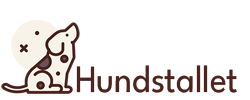
<style>
.page{position:relative;width:250px;height:100px;background:#ffffff}
.page>*{position:absolute;margin:0}
.t1{font:38.5px "LeagueSpartan-Regular";color:#4c241d;scale:0.91 1}
</style>
<div class="page">
<p class="t1" style="left:76px;top:65px;width:161px;height:28px">Hundstallet</p>
</div>
